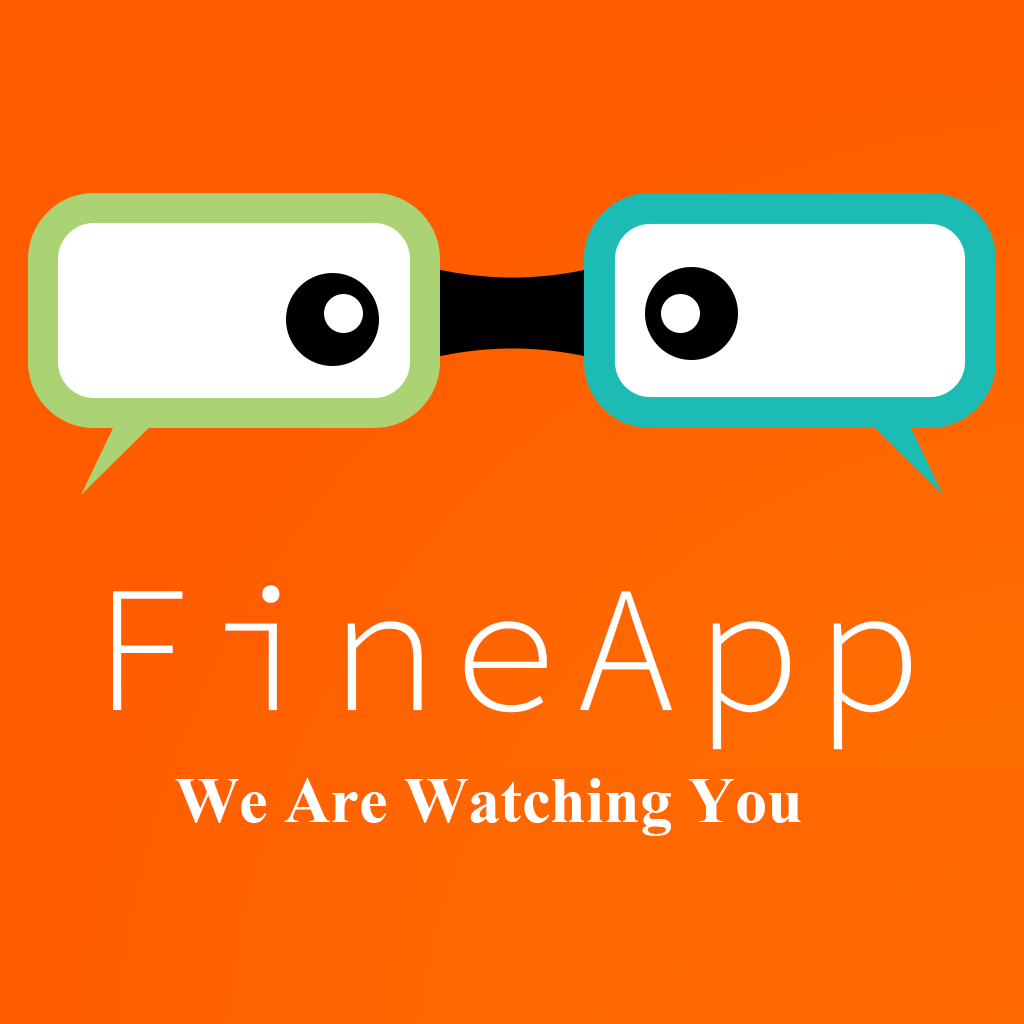
<style>
.page{position:relative;width:1024px;height:1024px;background:#ff5c00}
.page>*{position:absolute;margin:0}
.t1{font:180px "SourceCodePro-Light";letter-spacing:0.075em;color:#ffffff}
.t2{font:80px "Aparajita-Bold";color:#ffffff}
</style>
<div class="page">
<p class="t1" style="left:113px;top:585px;width:798px;height:165px">FineApp</p>
<p class="t2" style="left:175px;top:778px;width:626px;height:58px">We Are Watching You</p>
</div>
